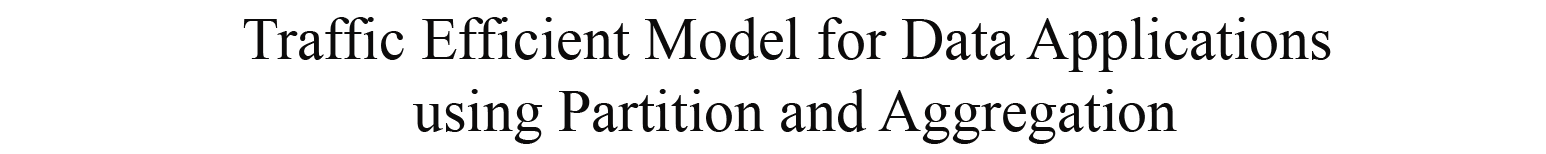
<style>
.page{position:relative;width:1546px;height:154px;background:#ffffff}
.page>*{position:absolute;margin:0}
.t1{font:60px "TimesNewRomanPSMT";color:#0c0b0b}
</style>
<div class="page">
<p class="t1" style="left:243px;top:17px;width:1088px;height:127px;text-align:center">Traffic Efficient Model for Data Applications <br>using Partition and Aggregation</p>
</div>
